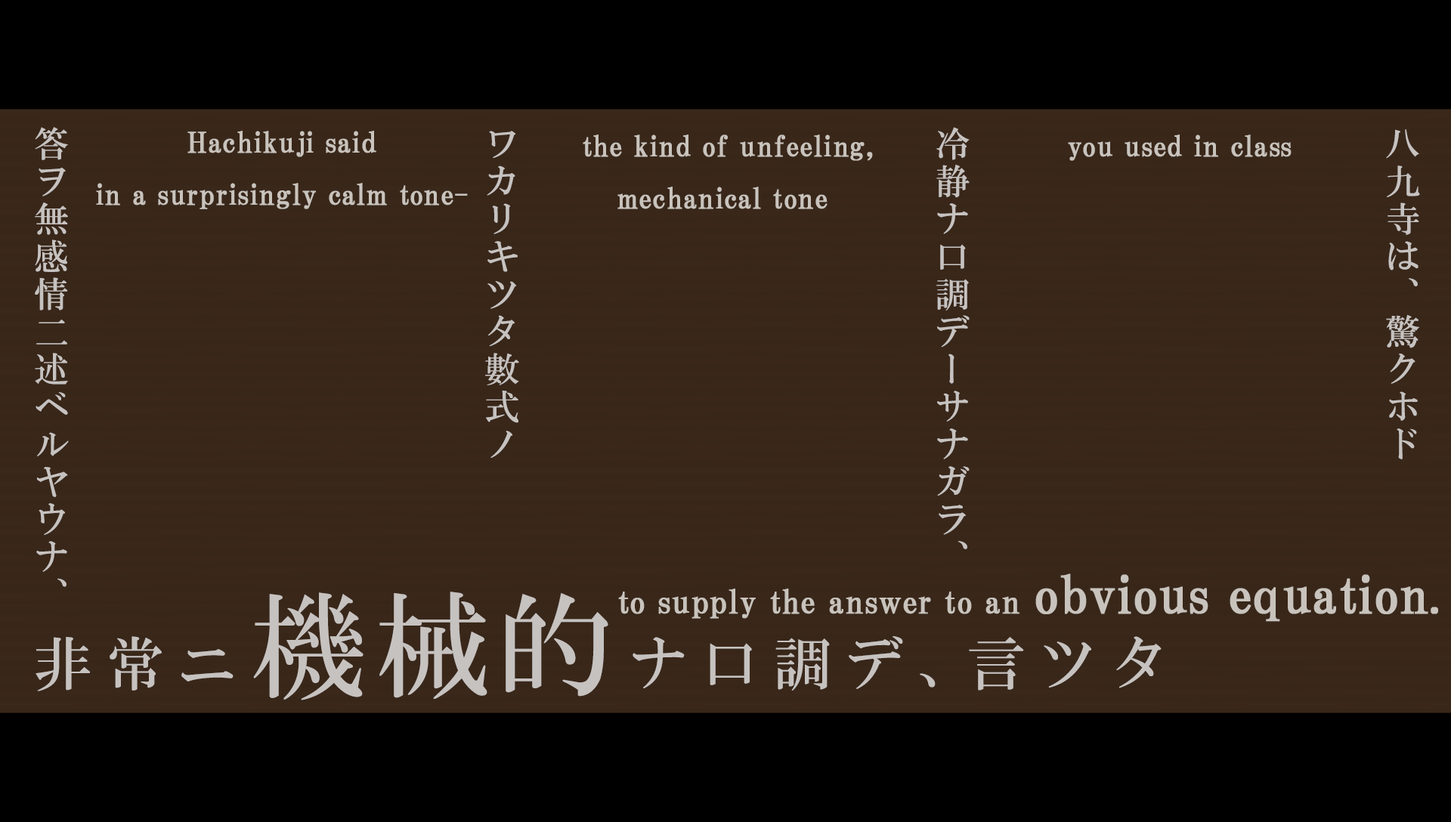
<style>
.page{position:relative;width:1451px;height:822px;background:#39271a}
.page>*{position:absolute;margin:0}
.t1{font:34.8px/450.3px "HGMinchoB";letter-spacing:0.08em;color:#c6c2c0}
.t2{font:28.2px/52.1px "HGPMinchoB";letter-spacing:0.01em;color:#c8c3bc;font-weight:bold}
.t3{font:28.2px "HGPMinchoB";letter-spacing:0.01em;color:#c8c3bc;font-weight:bold}
.t4{font:32.2px "HGPMinchoB";letter-spacing:0.01em;color:#c8c3bc;font-weight:bold}
.t5{font:51.4px "HGPMinchoB";color:#c8c3bc;font-weight:bold}
.t6{font:42.3px "HGPMinchoB";color:#c8c3bc;font-weight:bold}
.t7{font:113.3px "HGMinchoB";letter-spacing:0.08em;color:#c6c2c0}
.t8{font:58.2px "HGMinchoB";letter-spacing:0.24em;color:#c6c2c0}
.t9{font:58.2px "HGMinchoB";letter-spacing:-0.16em;color:#c6c2c0}
</style>
<div class="page">
<p class="t1" style="left:35px;top:127px;width:1385px;height:460px">八九寺は、驚クホド<br>冷静ナ口調デーサナガラ、<br>ワカリキツタ數式ノ<br>答ヲ無感情二述ベルヤウナ、</p>
<p class="t2" style="left:96px;top:131px;width:372px;height:78px;text-align:center">Hachikuji said<br>in a surprisingly calm tone-</p>
<p class="t2" style="left:583px;top:134px;width:290px;height:75px;text-align:center">the kind of unfeeling,<br>mechanical tone</p>
<p class="t3" style="left:1068px;top:134px;width:223px;height:27px">you used in class</p>
<p class="t4" style="left:618px;top:573px;width:820px;height:49px">to supply the answer to an <span class="t5">obvious equation</span><span class="t6">.</span></p>
<p class="t7" style="left:253px;top:592px;width:355px;height:108px">機械的</p>
<p class="t8" style="left:36px;top:636px;width:197px;height:55px">非常ニ</p>
<p class="t8" style="left:632px;top:636px;width:529px;height:55px">ナ口調デ<span class="t9">、</span>言ツタ</p>
</div>
